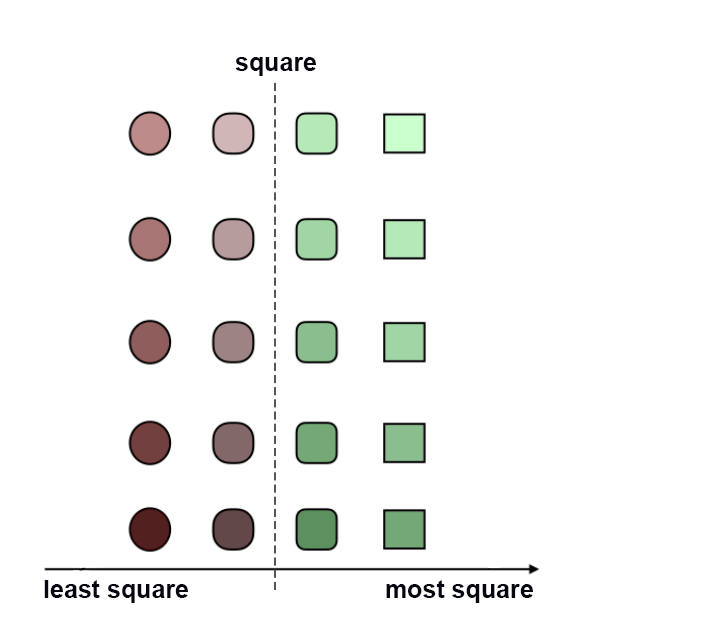
<style>
.page{position:relative;width:721px;height:628px;background:#ffffff}
.page>*{position:absolute;margin:0}
.t1{font:25px "Arial-BoldMT";color:#050610}
</style>
<div class="page">
<p class="t1" style="left:235px;top:57px;width:81px;height:19px">square</p>
<p class="t1" style="left:44px;top:580px;width:144px;height:23px">least square</p>
<p class="t1" style="left:386px;top:580px;width:147px;height:23px">most square</p>
</div>
